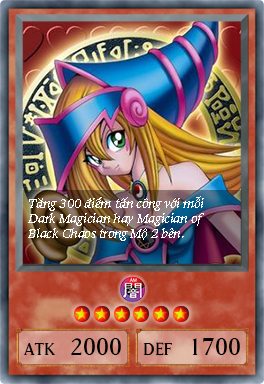
<style>
.page{position:relative;width:264px;height:384px}
.page>*{position:absolute;margin:0}
.t1{font:12.6px "Yu-Gi-Oh!-StoneSerifLT-Italic";color:#ffffff}
.t2{font:33.3px "Yu-Gi-Oh!-Matrix-Small-Caps-1";color:#000000}
.t3{font:25px "Yu-Gi-Oh!-Matrix-Small-Caps-1";color:#000000}
</style>
<div class="page">
<p class="t1" style="left:28px;top:196px;width:176px;height:45px">Tăng 300 điểm tấn công với mỗi Dark Magician hay Magician of Black Chaos trong Mộ 2 bên.</p>
<p class="t2" style="left:71px;top:338px;width:50px;height:17px">2000</p>
<p class="t3" style="left:143px;top:342px;width:29px;height:14px">DEF</p>
<p class="t2" style="left:192px;top:338px;width:48px;height:17px">1700</p>
<p class="t3" style="left:23px;top:343px;width:32px;height:12px">ATK</p>
</div>
